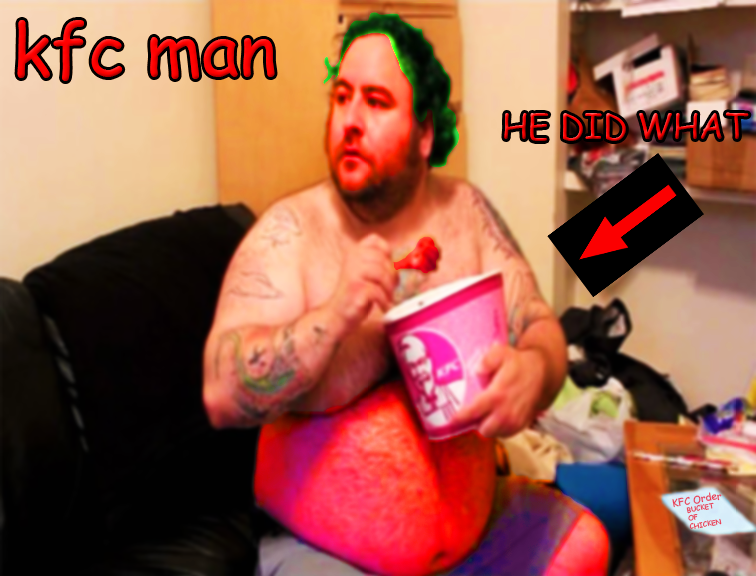
<style>
.page{position:relative;width:756px;height:576px}
.page>*{position:absolute;margin:0}
.t1{font:72px "ComicSansMS"}
.t2{font:34px "ComicSansMS"}
.t3{font:10px "ComicSansMS";color:#e93b54}
.t4{font:7px "ComicSansMS";color:#e93b54}
</style>
<div class="page">
<p class="t1" style="left:17px;top:20px;width:258px;height:61px">kfc man</p>
<p class="t2" style="left:504px;top:112px;width:245px;height:29px">HE DID WHAT</p>
<p class="t3" style="left:672px;top:492px;width:50px;height:16px;rotate:-10deg">KFC Order</p>
<p class="t4" style="left:686px;top:502px;width:36px;height:27px;rotate:-10deg">BUCKET<br>OF<br>CHICKEN</p>
</div>
